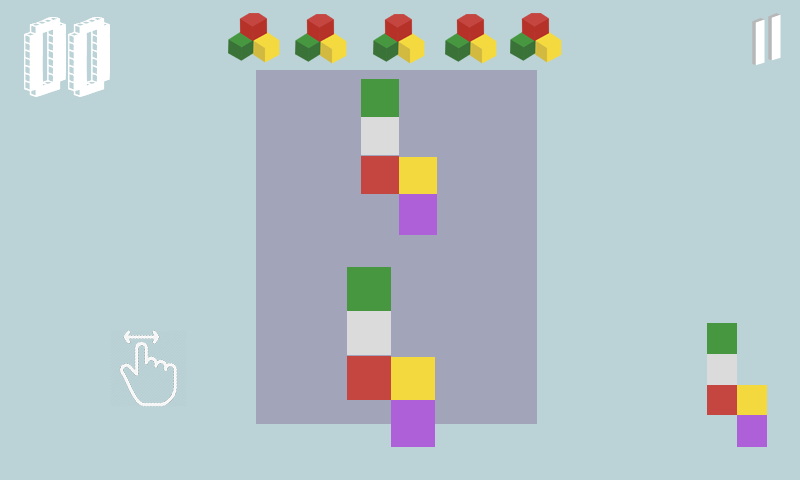
<style>
.page{position:relative;width:800px;height:480px;background:#bbd3d7}
.page>*{position:absolute;margin:0}
.t1{font:89px "Blox-(BRK";color:#ffffff}
</style>
<div class="page">
<p class="t1" style="left:24px;top:17px;width:86px;height:80px">00</p>
</div>
